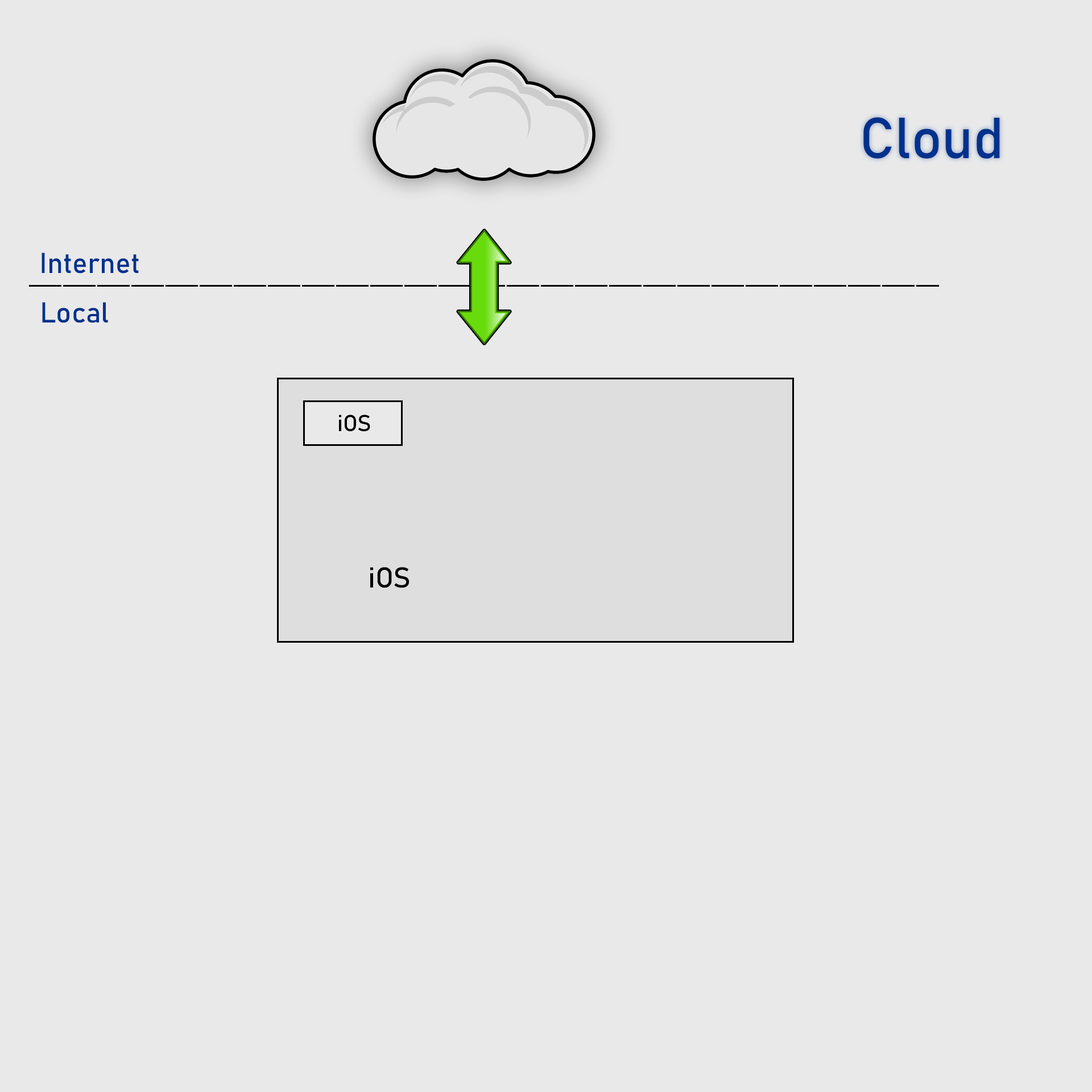
<style>
.page{position:relative;width:1092px;height:1092px;background:#e9e9e9}
.page>*{position:absolute;margin:0}
.t1{font:56.9px "Bahnschrift";color:#00318c}
.t2{font:28.4px "Bahnschrift";color:#00318c}
.t3{font:22.7px "Bahnschrift";color:#000000}
.t4{font:28.4px "Bahnschrift";color:#000000}
</style>
<div class="page">
<p class="t1" style="left:863px;top:117px;width:137px;height:42px">Cloud</p>
<p class="t2" style="left:42px;top:253px;width:97px;height:21px">Internet</p>
<p class="t2" style="left:42px;top:302px;width:66px;height:21px">Local</p>
<p class="t3" style="left:339px;top:415px;width:31px;height:17px">iOS</p>
<p class="t4" style="left:370px;top:567px;width:39px;height:21px">iOS</p>
</div>
